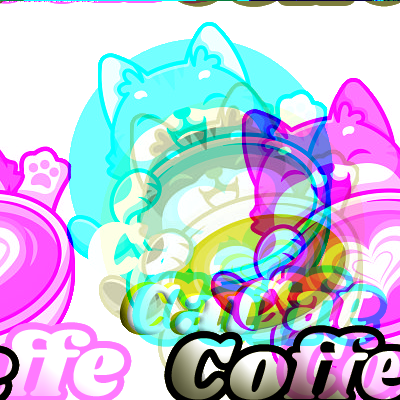
<style>
.page{position:relative;width:400px;height:400px;background:#ffffff}
.page>*{position:absolute;margin:0}
.t1{font:90px "Shrikhand-Regular"}
</style>
<div class="page">
<p class="t1" style="left:139px;top:271px;width:242px;height:68px">Coffe</p>
<p class="t1" style="left:139px;top:271px;width:242px;height:68px">Coffe</p>
</div>
